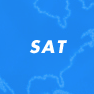
<style>
.page{position:relative;width:94px;height:94px}
.page>*{position:absolute;margin:0}
.t1{font:17px "FuturaStd-BoldOblique";letter-spacing:0.1em;color:#ffffff}
</style>
<div class="page">
<p class="t1" style="left:29px;top:40px;width:38px;height:14px">SAT</p>
</div>
